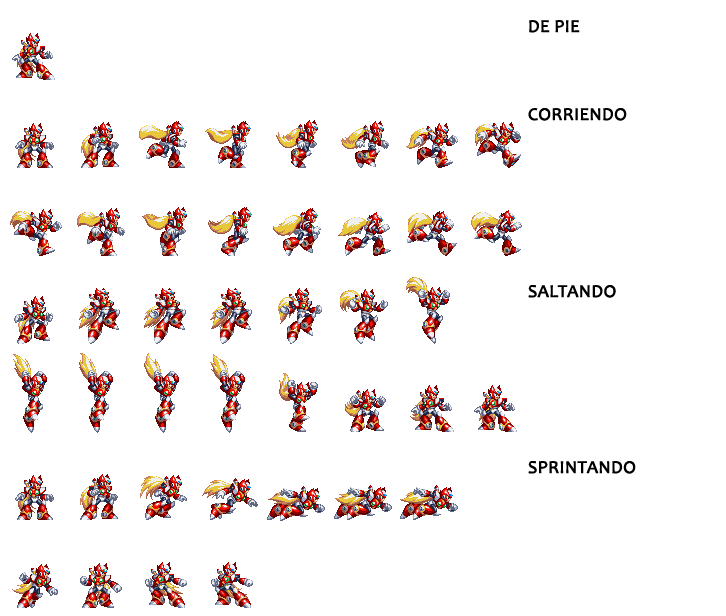
<style>
.page{position:relative;width:726px;height:616px;background:#ffffff}
.page>*{position:absolute;margin:0}
.t1{font:18px "Candara";color:#000000;font-weight:bold}
.t2{font:14px "Default_SC-85W";color:#000000}
</style>
<div class="page">
<p class="t1" style="left:529px;top:20px;width:51px;height:13px"><span class="t2"><br></span>DE PIE</p>
<p class="t1" style="left:528px;top:108px;width:99px;height:13px"><span class="t2"><br></span>CORRIENDO</p>
<p class="t1" style="left:528px;top:285px;width:88px;height:13px"><span class="t2"><br></span>SALTANDO</p>
<p class="t1" style="left:528px;top:461px;width:108px;height:13px"><span class="t2"><br></span>SPRINTANDO</p>
</div>
